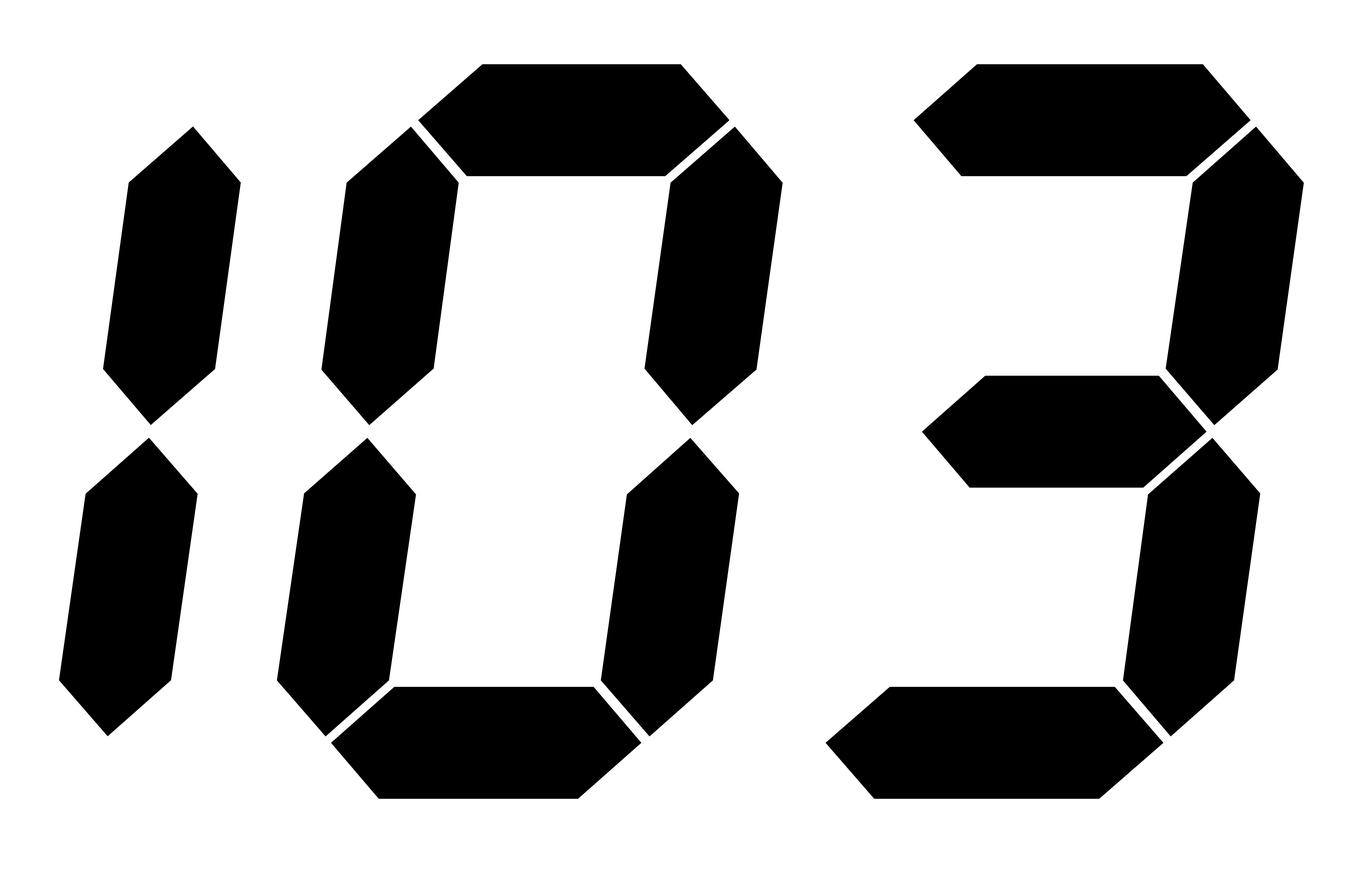
<style>
.page{position:relative;width:1362px;height:876px;background:#ffffff}
.page>*{position:absolute;margin:0}
.t1{font:917.7px "MouseLEDU";letter-spacing:0.05em;color:#000000}
</style>
<div class="page">
<p class="t1" style="left:59px;top:64px;width:1245px;height:734px">103</p>
</div>
